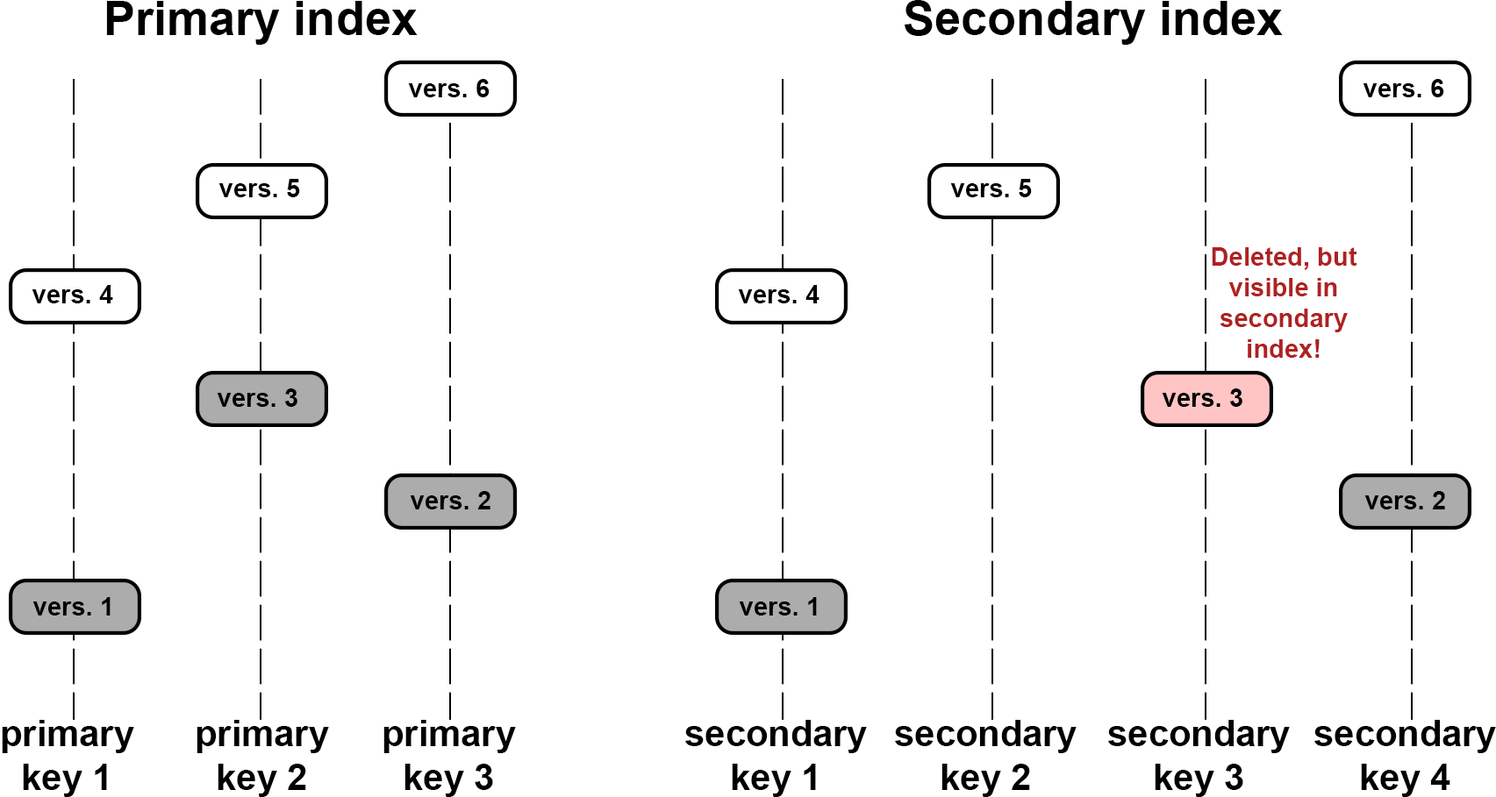
<style>
.page{position:relative;width:1496px;height:797px;background:#ffffff}
.page>*{position:absolute;margin:0}
.t1{font:47.5px "Arial-BoldMT";color:#000000}
.t2{font:25.6px "Arial-BoldMT";color:#000000}
.t3{font:25.6px "Arial-BoldMT";color:#af2121}
.t4{font:36.5px "Arial-BoldMT";color:#000000}
</style>
<div class="page">
<p class="t1" style="left:106px;top:1px;width:312px;height:44px">Primary index</p>
<p class="t1" style="left:904px;top:0px;width:378px;height:45px">Secondary index</p>
<p class="t2" style="left:408px;top:79px;width:81px;height:18px">vers. 6</p>
<p class="t2" style="left:1362px;top:79px;width:82px;height:18px">vers. 6</p>
<p class="t2" style="left:218px;top:179px;width:82px;height:18px">vers. 5</p>
<p class="t2" style="left:950px;top:179px;width:82px;height:18px">vers. 5</p>
<p class="t3" style="left:1211px;top:247px;width:146px;height:111px;text-align:center">Deleted, but<br>visible in<br>secondary<br>index!</p>
<p class="t2" style="left:32px;top:285px;width:81px;height:18px">vers. 4</p>
<p class="t2" style="left:738px;top:285px;width:81px;height:18px">vers. 4</p>
<p class="t2" style="left:217px;top:389px;width:80px;height:18px">vers. 3</p>
<p class="t2" style="left:1161px;top:389px;width:81px;height:18px">vers. 3</p>
<p class="t2" style="left:410px;top:491px;width:80px;height:19px">vers. 2</p>
<p class="t2" style="left:1364px;top:491px;width:81px;height:19px">vers. 2</p>
<p class="t2" style="left:32px;top:597px;width:79px;height:19px">vers. 1</p>
<p class="t2" style="left:739px;top:597px;width:78px;height:19px">vers. 1</p>
<p class="t4" style="left:2px;top:720px;width:132px;height:77px;text-align:center">primary<br>key 1</p>
<p class="t4" style="left:196px;top:720px;width:133px;height:77px;text-align:center">primary<br>key 2</p>
<p class="t4" style="left:383px;top:720px;width:133px;height:77px;text-align:center">primary<br>key 3</p>
<p class="t4" style="left:685px;top:720px;width:182px;height:77px;text-align:center">secondary<br>key 1</p>
<p class="t4" style="left:895px;top:720px;width:181px;height:77px;text-align:center">secondary<br>key 2</p>
<p class="t4" style="left:1108px;top:720px;width:181px;height:77px;text-align:center">secondary<br>key 3</p>
<p class="t4" style="left:1314px;top:720px;width:182px;height:77px;text-align:center">secondary<br>key 4</p>
</div>
